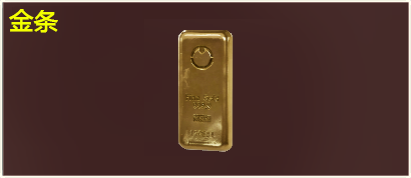
<style>
.page{position:relative;width:411px;height:178px}
.page>*{position:absolute;margin:0}
.t1{font:24px "MicrosoftYaHeiUI";color:#f4ff00;font-weight:bold}
</style>
<div class="page">
<p class="t1" style="left:9px;top:9px;width:49px;height:24px">金条</p>
</div>
